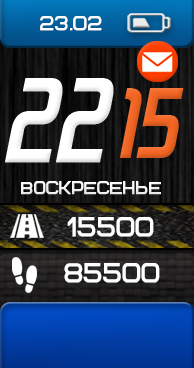
<style>
.page{position:relative;width:194px;height:368px}
.page>*{position:absolute;margin:0}
.t1{font:19.8px "Bicubik";color:#fffefe;text-transform:uppercase;font-weight:bold;scale:0.91 1}
.t2{font:93.5px "Zekton-BoldItalic";letter-spacing:-0.005em;color:#ffffff;text-transform:uppercase;font-weight:bold;scale:0.93 1}
.t3{font:79.2px "Zekton-BoldItalic";letter-spacing:-0.005em;color:#f26522;text-transform:uppercase;font-weight:bold;scale:0.91 1}
.t4{font:17.6px "Bicubik";letter-spacing:-0.005em;color:#fffefe;text-transform:uppercase;font-weight:bold;scale:0.91 1}
.t5{font:26.4px "Bicubik";letter-spacing:-0.005em;color:#fffefe;text-transform:uppercase;font-weight:bold;scale:0.91 1}
</style>
<div class="page">
<p class="t1" style="left:40px;top:16px;width:62px;height:15px">23.02</p>
<p class="t2" style="left:5px;top:78px;width:109px;height:85px">22</p>
<p class="t3" style="left:120px;top:88px;width:64px;height:70px">15</p>
<p class="t4" style="left:21px;top:181px;width:140px;height:14px">ВоСКресенье</p>
<p class="t5" style="left:67px;top:217px;width:87px;height:20px">15500</p>
<p class="t5" style="left:64px;top:263px;width:96px;height:20px">85500</p>
</div>
